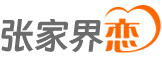
<style>
.page{position:relative;width:162px;height:60px;background:#ffffff}
.page>*{position:absolute;margin:0}
.t1{font:37.5px "DingTalk-JinBuTi";letter-spacing:-0.1em;color:#6c6c6c;font-weight:bold}
</style>
<div class="page">
<p class="t1" style="left:1px;top:19px;width:103px;height:34px">张家界</p>
</div>
